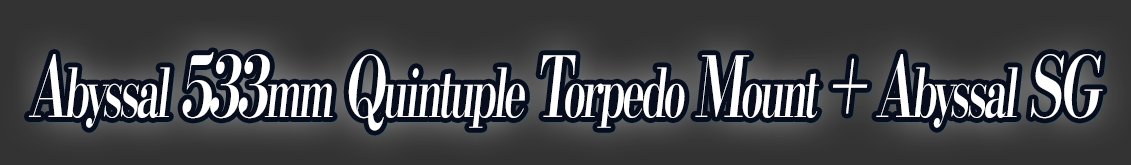
<style>
.page{position:relative;width:1131px;height:165px;background:#333333}
.page>*{position:absolute;margin:0}
.t1{font:67.2px "KochoStd-Heavy";letter-spacing:-0.08em;color:#ffffff;font-style:italic;scale:0.62 1}
.t2{font:84px "KochoStd-Heavy";letter-spacing:-0.08em;color:#ffffff;font-style:italic;scale:0.62 1}
</style>
<div class="page">
<p class="t1" style="left:28px;top:52px;width:1075px;height:79px"><span class="t2">A</span>byssal<span class="t2"> 533</span>mm<span class="t2"> Q</span>uintuple<span class="t2"> T</span>orpedo<span class="t2"> M</span>ount<span class="t2"> + A</span>byssal<span class="t2"> SG</span></p>
</div>
